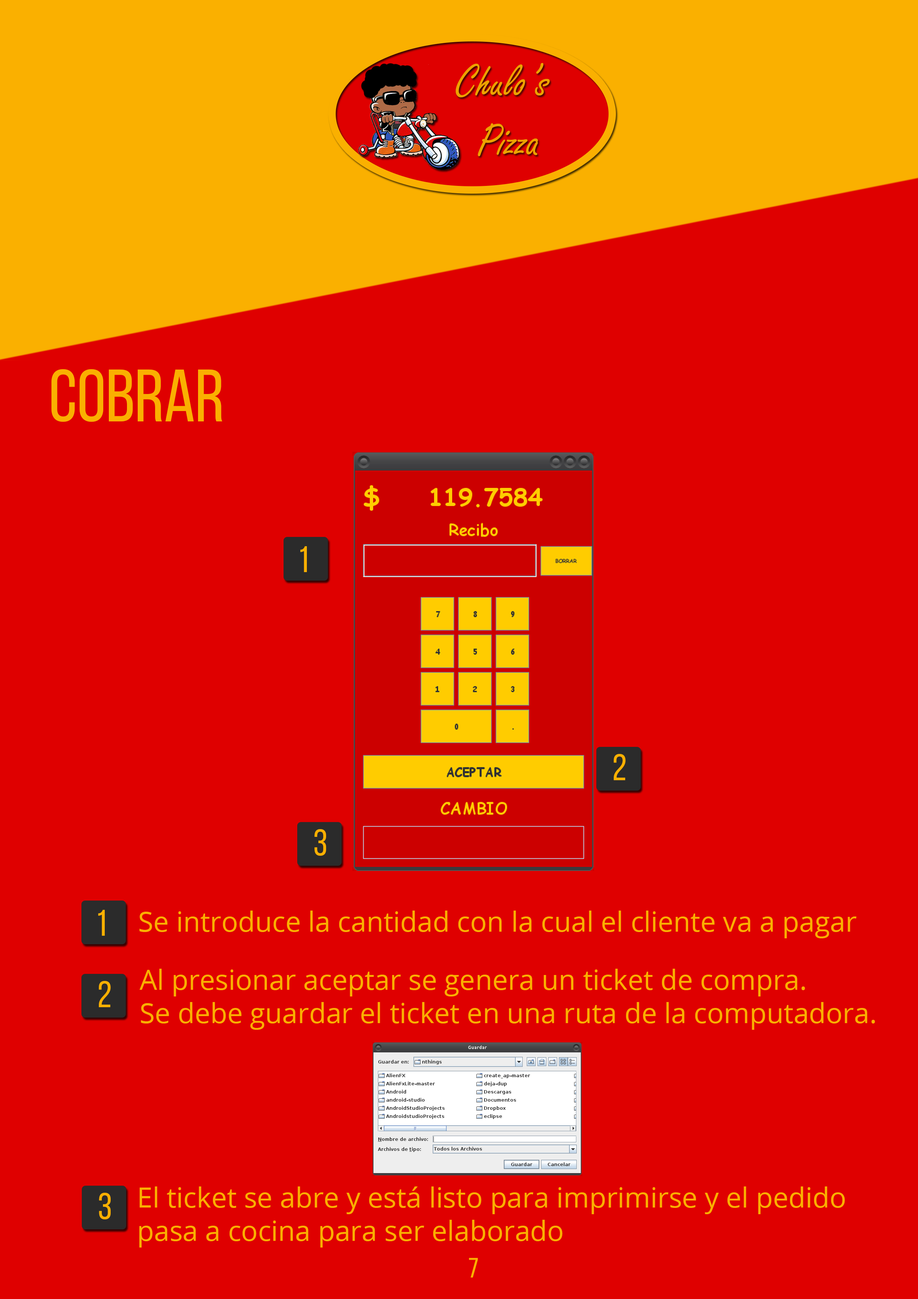
<style>
.page{position:relative;width:918px;height:1299px;background:#df0000}
.page>*{position:absolute;margin:0}
.t1{font:74px "BebasNeueRegular";color:#fab000}
.t2{font:37px "BebasNeueRegular";color:#fab000}
.t3{font:27.8px "OpenSans";color:#fab000}
.t4{font:27.8px "BebasNeueRegular";color:#fab000}
</style>
<div class="page">
<p class="t1" style="left:51px;top:369px;width:172px;height:53px">cOBRAR</p>
<p class="t2" style="left:300px;top:546px;width:7px;height:26px">1</p>
<p class="t2" style="left:614px;top:754px;width:12px;height:26px">2</p>
<p class="t2" style="left:314px;top:829px;width:12px;height:27px">3</p>
<p class="t2" style="left:98px;top:910px;width:7px;height:26px">1</p>
<p class="t3" style="left:139px;top:910px;width:718px;height:28px">Se introduce la cantidad con la cual el cliente va a pagar</p>
<p class="t3" style="left:140px;top:968px;width:735px;height:62px">Al presionar aceptar se genera un ticket de compra. <br>Se debe guardar el ticket en una ruta de la computadora.</p>
<p class="t2" style="left:99px;top:981px;width:12px;height:26px">2</p>
<p class="t2" style="left:99px;top:1192px;width:12px;height:27px">3</p>
<p class="t3" style="left:139px;top:1186px;width:706px;height:61px">El ticket se abre y está listo para imprimirse y el pedido <br>pasa a cocina para ser elaborado</p>
<p class="t4" style="left:469px;top:1258px;width:9px;height:19px">7</p>
</div>
